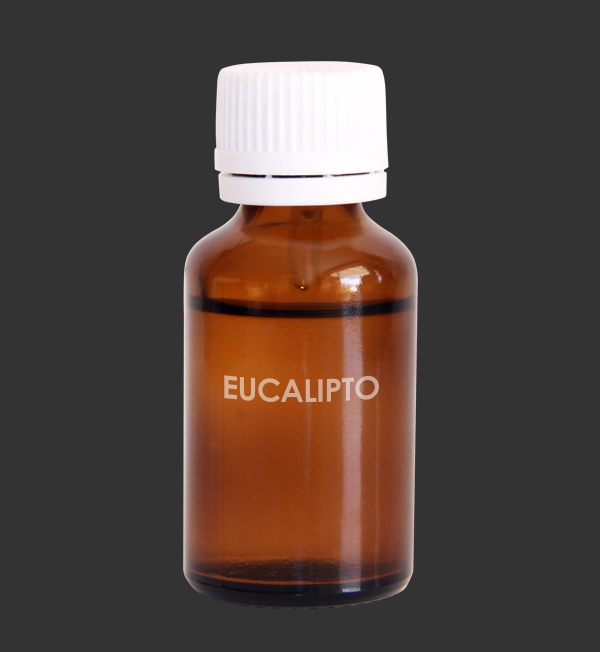
<style>
.page{position:relative;width:600px;height:652px;background:#333333}
.page>*{position:absolute;margin:0}
.t1{font:31.6px "CenturyGothic-Bold";letter-spacing:-0.025em;color:#d7ad91}
</style>
<div class="page">
<p class="t1" style="left:224px;top:375px;width:155px;height:28px">EUCALIPTO</p>
</div>
